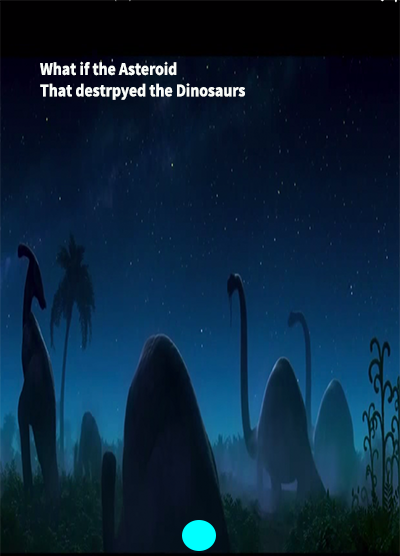
<style>
.page{position:relative;width:400px;height:556px}
.page>*{position:absolute;margin:0}
.t1{font:17.9px "SourceSansPro-Bold";color:#f9fcfa;scale:0.88 1}
</style>
<div class="page">
<p class="t1" style="left:40px;top:61px;width:205px;height:39px">What if the Asteroid<br>That destrpyed the Dinosaurs</p>
</div>
